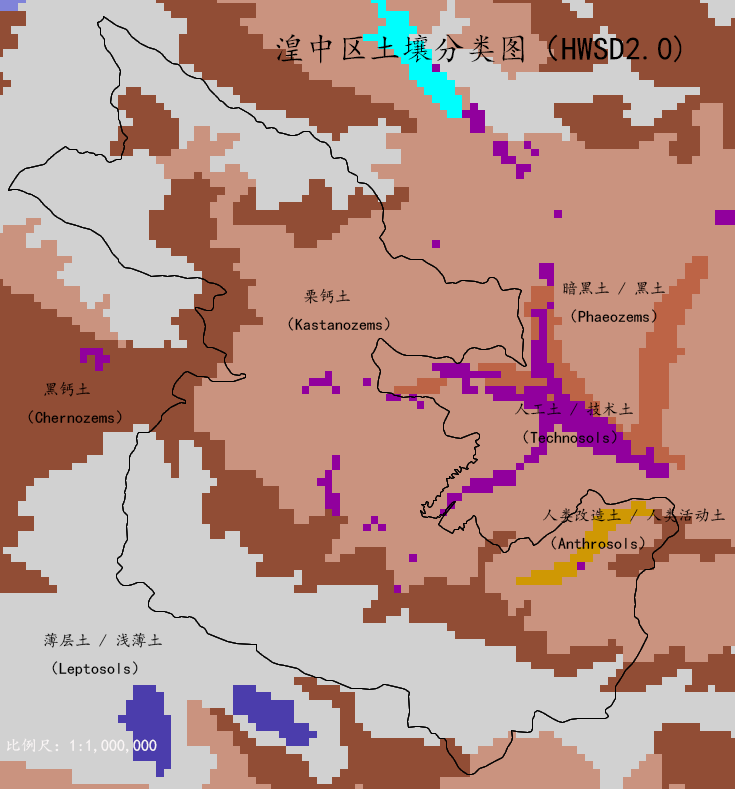
<style>
.page{position:relative;width:735px;height:789px;background:#ca937f}
.page>*{position:absolute;margin:0}
.t1{font:32px "KaiTi";color:#000000}
.t2{font:12px "KaiTi";color:#000000}
.t3{font:12px "KaiTi";color:#faf6f6}
</style>
<div class="page">
<p class="t1" style="left:276px;top:34px;width:406px;height:30px">湟中区土壤分类图（HWSD2.0)</p>
<p class="t2" style="left:563px;top:281px;width:102px;height:42px">暗黑土 / 黑土<br>（Phaeozems）</p>
<p class="t2" style="left:288px;top:288px;width:102px;height:43px">栗钙土<br>（Kastanozems）</p>
<p class="t2" style="left:28px;top:381px;width:94px;height:43px">黑钙土<br>（Chernozems）</p>
<p class="t2" style="left:515px;top:402px;width:118px;height:42px">人工土 / 技术土<br>（Technosols）</p>
<p class="t2" style="left:543px;top:508px;width:182px;height:42px">人类改造土 / 人类活动土<br>（Anthrosols）</p>
<p class="t2" style="left:44px;top:632px;width:118px;height:45px">薄层土 / 浅薄土<br>（Leptosols）</p>
<p class="t3" style="left:7px;top:738px;width:150px;height:16px">比例尺：1:1,000,000</p>
</div>
